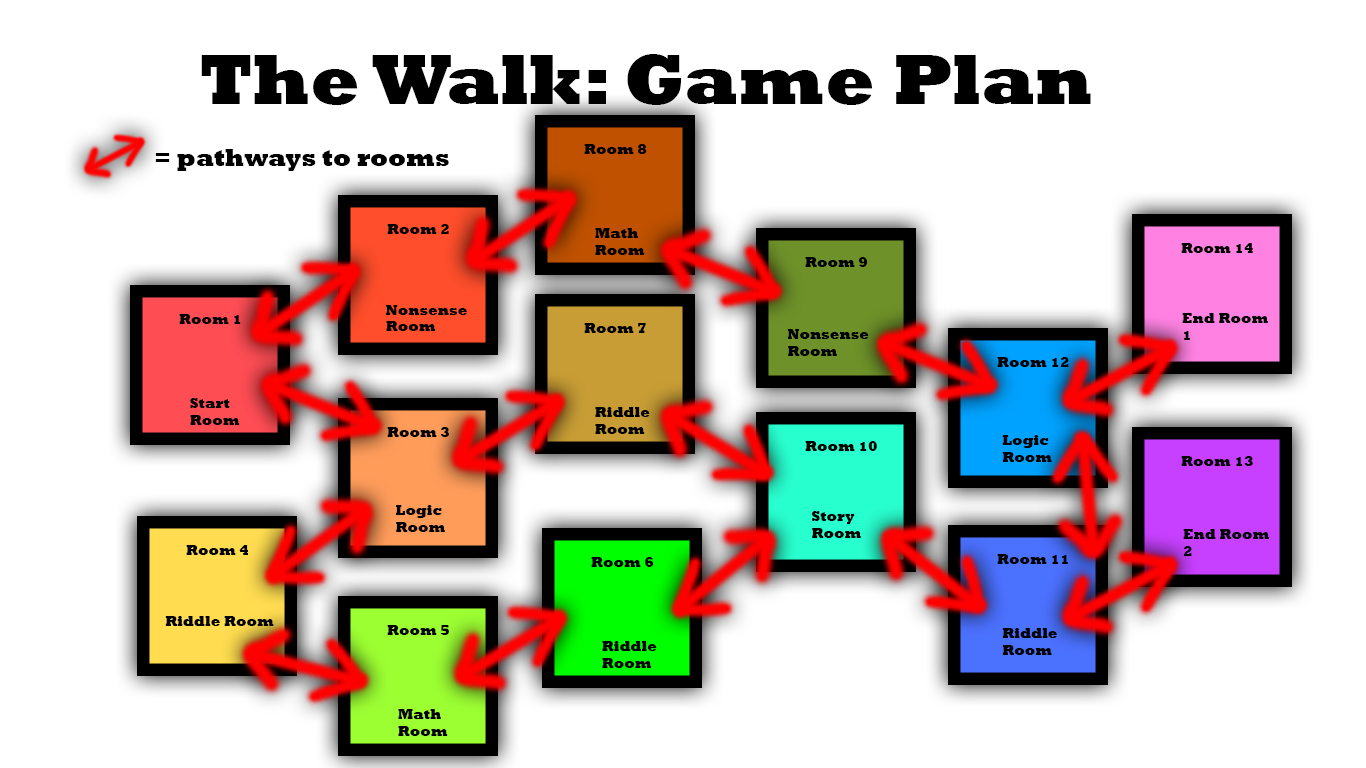
<style>
.page{position:relative;width:1366px;height:768px;background:#ffffff}
.page>*{position:absolute;margin:0}
.t1{font:72px "Rockwell-ExtraBold";color:#000000}
.t2{font:24px "Rockwell-ExtraBold";color:#000000}
.t3{font:14px "Rockwell-ExtraBold";color:#000000}
</style>
<div class="page">
<p class="t1" style="left:201px;top:54px;width:890px;height:51px">The Walk: Game Plan</p>
<p class="t2" style="left:155px;top:149px;width:294px;height:22px">= pathways to rooms</p>
<p class="t3" style="left:584px;top:144px;width:63px;height:10px">Room 8</p>
<p class="t3" style="left:387px;top:224px;width:62px;height:10px">Room 2</p>
<p class="t3" style="left:595px;top:228px;width:50px;height:27px">Math<br>Room</p>
<p class="t3" style="left:1181px;top:243px;width:72px;height:10px">Room 14</p>
<p class="t3" style="left:805px;top:257px;width:62px;height:10px">Room 9</p>
<p class="t3" style="left:386px;top:305px;width:81px;height:26px">Nonsense<br>Room</p>
<p class="t3" style="left:179px;top:314px;width:62px;height:10px">Room 1</p>
<p class="t3" style="left:1182px;top:313px;width:86px;height:27px">End Room<br>1</p>
<p class="t3" style="left:584px;top:323px;width:62px;height:10px">Room 7</p>
<p class="t3" style="left:787px;top:329px;width:82px;height:27px">Nonsense<br>Room</p>
<p class="t3" style="left:997px;top:357px;width:72px;height:10px">Room 12</p>
<p class="t3" style="left:190px;top:398px;width:50px;height:27px">Start<br>Room</p>
<p class="t3" style="left:595px;top:407px;width:55px;height:27px">Riddle<br>Room</p>
<p class="t3" style="left:387px;top:427px;width:62px;height:10px">Room 3</p>
<p class="t3" style="left:1002px;top:435px;width:50px;height:27px">Logic<br>Room</p>
<p class="t3" style="left:805px;top:441px;width:72px;height:10px">Room 10</p>
<p class="t3" style="left:1181px;top:456px;width:72px;height:10px">Room 13</p>
<p class="t3" style="left:396px;top:505px;width:49px;height:27px">Logic<br>Room</p>
<p class="t3" style="left:812px;top:511px;width:49px;height:27px">Story<br>Room</p>
<p class="t3" style="left:1183px;top:529px;width:86px;height:27px">End Room<br>2</p>
<p class="t3" style="left:186px;top:545px;width:62px;height:10px">Room 4</p>
<p class="t3" style="left:591px;top:557px;width:63px;height:10px">Room 6</p>
<p class="t3" style="left:997px;top:554px;width:71px;height:10px">Room 11</p>
<p class="t3" style="left:165px;top:616px;width:109px;height:10px">Riddle Room</p>
<p class="t3" style="left:387px;top:625px;width:62px;height:10px">Room 5</p>
<p class="t3" style="left:1002px;top:628px;width:55px;height:27px">Riddle<br>Room</p>
<p class="t3" style="left:602px;top:641px;width:55px;height:27px">Riddle<br>Room</p>
<p class="t3" style="left:398px;top:709px;width:50px;height:27px">Math<br>Room</p>
</div>
